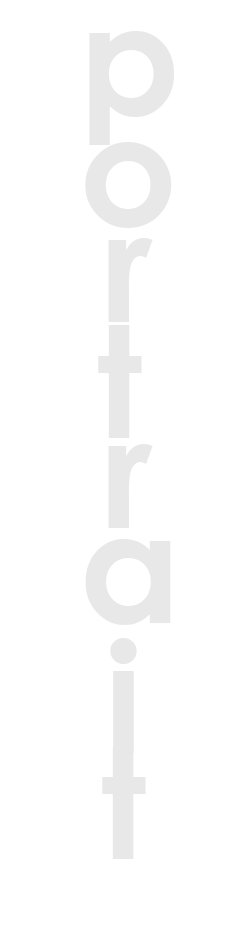
<style>
.page{position:relative;width:250px;height:930px;background:#ffffff}
.page>*{position:absolute;margin:0}
.t1{font:154px/106px "CenturyGothic-Bold";letter-spacing:0.14em;color:#e8e8e8}
.t2{font:154px/111px "CenturyGothic-Bold";letter-spacing:0.14em;color:#e8e8e8}
.t3{font:154px/96px "CenturyGothic-Bold";letter-spacing:0.1em;color:#e8e8e8}
.t4{font:154px/90px "CenturyGothic-Bold";letter-spacing:0.12em;color:#e8e8e8}
.t5{font:154px/80px "CenturyGothic-Bold";letter-spacing:0.14em;color:#e8e8e8}
.t6{font:154px/105px "CenturyGothic-Bold";letter-spacing:0.12em;color:#e8e8e8}
</style>
<div class="page">
<p class="t1" style="left:85px;top:31px;width:90px;height:828px;text-align:center">p<span class="t2">o</span><span class="t3">r</span>t<span class="t4">r</span><span class="t5">a</span><span class="t6">i<br></span>t</p>
</div>
